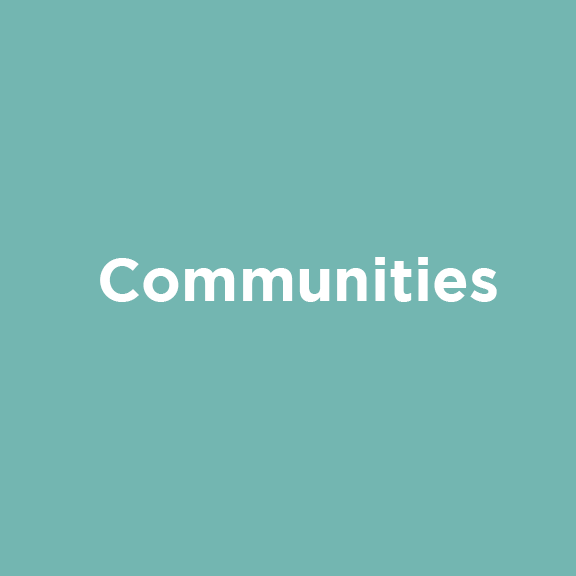
<style>
.page{position:relative;width:576px;height:576px;background:#73b6b1}
.page>*{position:absolute;margin:0}
.t1{font:59.6px "Gotham-Bold";color:#ffffff}
</style>
<div class="page">
<p class="t1" style="left:100px;top:257px;width:397px;height:45px">Communities</p>
</div>
